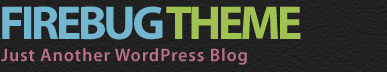
<style>
.page{position:relative;width:387px;height:72px}
.page>*{position:absolute;margin:0}
.t1{font:48px "MyriadPro-Bold";letter-spacing:-0.075em;color:#72b6cf}
.t2{font:48px "MyriadPro-Bold";letter-spacing:-0.075em;color:#9fc253}
.t3{font:18px "MyriadPro-Semibold";letter-spacing:0.05em;color:#bb6f8e}
</style>
<div class="page">
<p class="t1" style="left:2px;top:6px;width:299px;height:34px">FIREBUG<span class="t2"> THEME</span></p>
<p class="t3" style="left:1px;top:48px;width:246px;height:17px">Just Another WordPress Blog</p>
</div>
